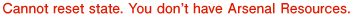
<style>
.page{position:relative;width:351px;height:16px;background:#ffffff}
.page>*{position:absolute;margin:0}
.t1{font:14px "FutoGoB101Pr5-Bold";color:#e31a00}
</style>
<div class="page">
<p class="t1" style="left:3px;top:2px;width:347px;height:12px">Cannot reset state. You don’t have Arsenal Resources.</p>
</div>
